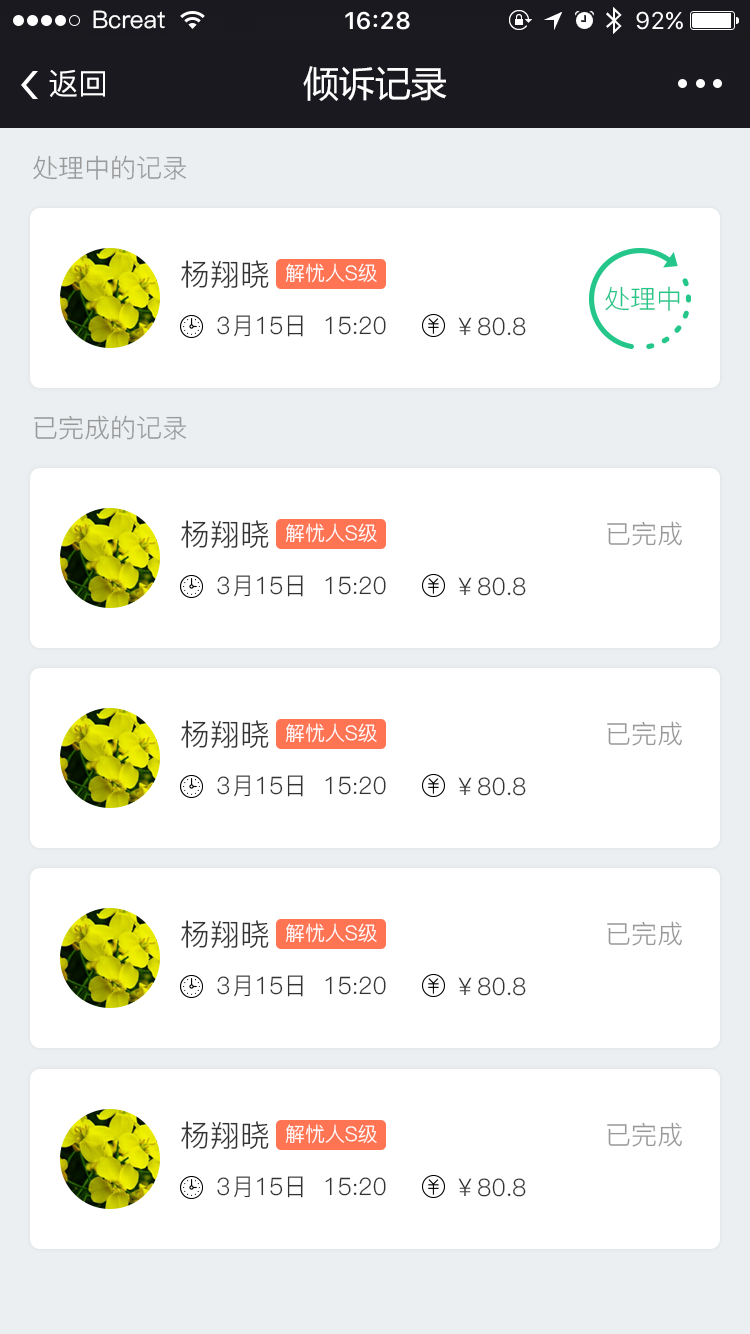
<style>
.page{position:relative;width:750px;height:1334px;background:#ffffff}
.page>*{position:absolute;margin:0}
.t1{font:24px "PingFang-SC-Medium";color:#ffffff}
.t2{font:30px "PingFang-SC-Medium";color:#ffffff}
.t3{font:36px "MicrosoftYaHei";color:#ffffff}
.t4{font:26px "PingFang-SC-Regular";color:#999999}
.t5{font:30px "PingFang-SC-Regular";color:#333333}
.t6{font:20px "PingFang-SC-Regular";color:#ffffff}
.t7{font:26px "PingFang-SC-Regular";color:#24c789}
.t8{font:24px "PingFang-SC-Regular";color:#333333}
</style>
<div class="page">
<p class="t1" style="left:93px;top:10px;width:72px;height:19px">Bcreat</p>
<p class="t1" style="left:93px;top:10px;width:72px;height:19px">Bcreat</p>
<p class="t2" style="left:49px;top:69px;width:56px;height:28px">返回</p>
<p class="t2" style="left:49px;top:69px;width:56px;height:28px">返回</p>
<p class="t3" style="left:303px;top:66px;width:144px;height:35px">倾诉记录</p>
<p class="t3" style="left:303px;top:66px;width:144px;height:35px">倾诉记录</p>
<p class="t4" style="left:33px;top:155px;width:153px;height:25px">处理中的记录</p>
<p class="t5" style="left:181px;top:260px;width:88px;height:28px">杨翔晓</p>
<p class="t6" style="left:285px;top:263px;width:92px;height:20px">解忧人S级</p>
<p class="t7" style="left:605px;top:286px;width:75px;height:25px">处理中</p>
<p class="t8" style="left:217px;top:315px;width:169px;height:22px">3月15日  15:20</p>
<p class="t8" style="left:458px;top:317px;width:68px;height:19px">￥80.8</p>
<p class="t4" style="left:34px;top:415px;width:152px;height:25px">已完成的记录</p>
<p class="t5" style="left:181px;top:520px;width:88px;height:28px">杨翔晓</p>
<p class="t4" style="left:607px;top:521px;width:75px;height:25px">已完成</p>
<p class="t6" style="left:285px;top:523px;width:92px;height:20px">解忧人S级</p>
<p class="t8" style="left:217px;top:575px;width:169px;height:22px">3月15日  15:20</p>
<p class="t8" style="left:458px;top:577px;width:68px;height:19px">￥80.8</p>
<p class="t5" style="left:181px;top:720px;width:88px;height:28px">杨翔晓</p>
<p class="t6" style="left:285px;top:723px;width:92px;height:20px">解忧人S级</p>
<p class="t4" style="left:607px;top:721px;width:75px;height:25px">已完成</p>
<p class="t8" style="left:217px;top:775px;width:169px;height:22px">3月15日  15:20</p>
<p class="t8" style="left:458px;top:777px;width:68px;height:19px">￥80.8</p>
<p class="t5" style="left:181px;top:920px;width:88px;height:28px">杨翔晓</p>
<p class="t6" style="left:285px;top:923px;width:92px;height:20px">解忧人S级</p>
<p class="t4" style="left:607px;top:921px;width:75px;height:25px">已完成</p>
<p class="t8" style="left:217px;top:975px;width:169px;height:22px">3月15日  15:20</p>
<p class="t8" style="left:458px;top:977px;width:68px;height:19px">￥80.8</p>
<p class="t5" style="left:181px;top:1121px;width:88px;height:28px">杨翔晓</p>
<p class="t6" style="left:285px;top:1124px;width:92px;height:20px">解忧人S级</p>
<p class="t4" style="left:607px;top:1122px;width:75px;height:25px">已完成</p>
<p class="t8" style="left:217px;top:1176px;width:169px;height:22px">3月15日  15:20</p>
<p class="t8" style="left:458px;top:1178px;width:68px;height:19px">￥80.8</p>
</div>
